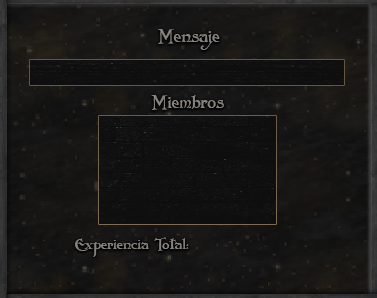
<style>
.page{position:relative;width:377px;height:298px}
.page>*{position:absolute;margin:0}
.t1{font:17.7px "Folkard";color:#88837e}
.t2{font:14.8px "Folkard";color:#88837e}
</style>
<div class="page">
<p class="t1" style="left:158px;top:29px;width:62px;height:21px">Mensaje</p>
<p class="t1" style="left:151px;top:95px;width:73px;height:15px">Miembros</p>
<p class="t2" style="left:75px;top:237px;width:114px;height:20px">Experiencia Total:</p>
</div>
